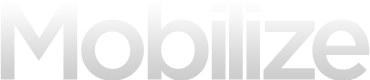
<style>
.page{position:relative;width:370px;height:80px;background:#ffffff}
.page>*{position:absolute;margin:0}
.t1{font:110.9px "Gotham-Medium";letter-spacing:-0.1em;color:#e3e3e3}
.t2{font:110.9px "Gotham-Medium";letter-spacing:-0.085em;color:#e3e3e3}
.t3{font:110.9px "Gotham-Medium";letter-spacing:-0.13em;color:#e3e3e3}
</style>
<div class="page">
<p class="t1" style="left:0px;top:0px;width:370px;height:81px">M<span class="t2">o</span>b<span class="t3">il</span>ize</p>
</div>
